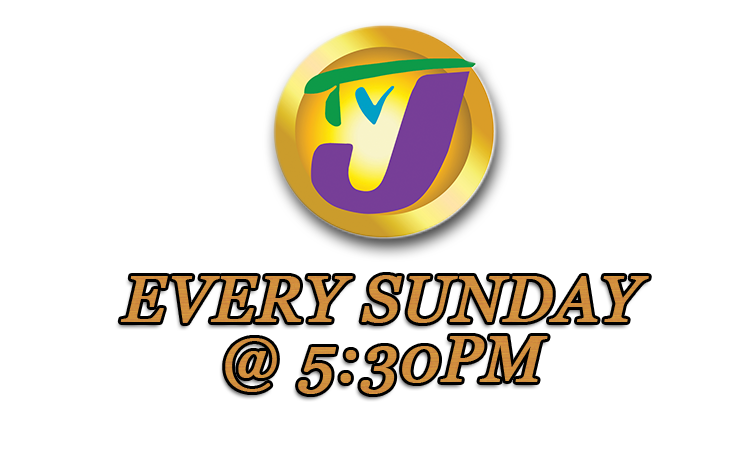
<style>
.page{position:relative;width:750px;height:450px;background:#ffffff}
.page>*{position:absolute;margin:0}
.t1{font:65px/60px "Georgia-Italic";color:#d18e3e;text-transform:uppercase;font-weight:bold}
</style>
<div class="page">
<p class="t1" style="left:120px;top:275px;width:529px;height:119px;text-align:center">Every Sunday <br>@ 5:30PM</p>
</div>
